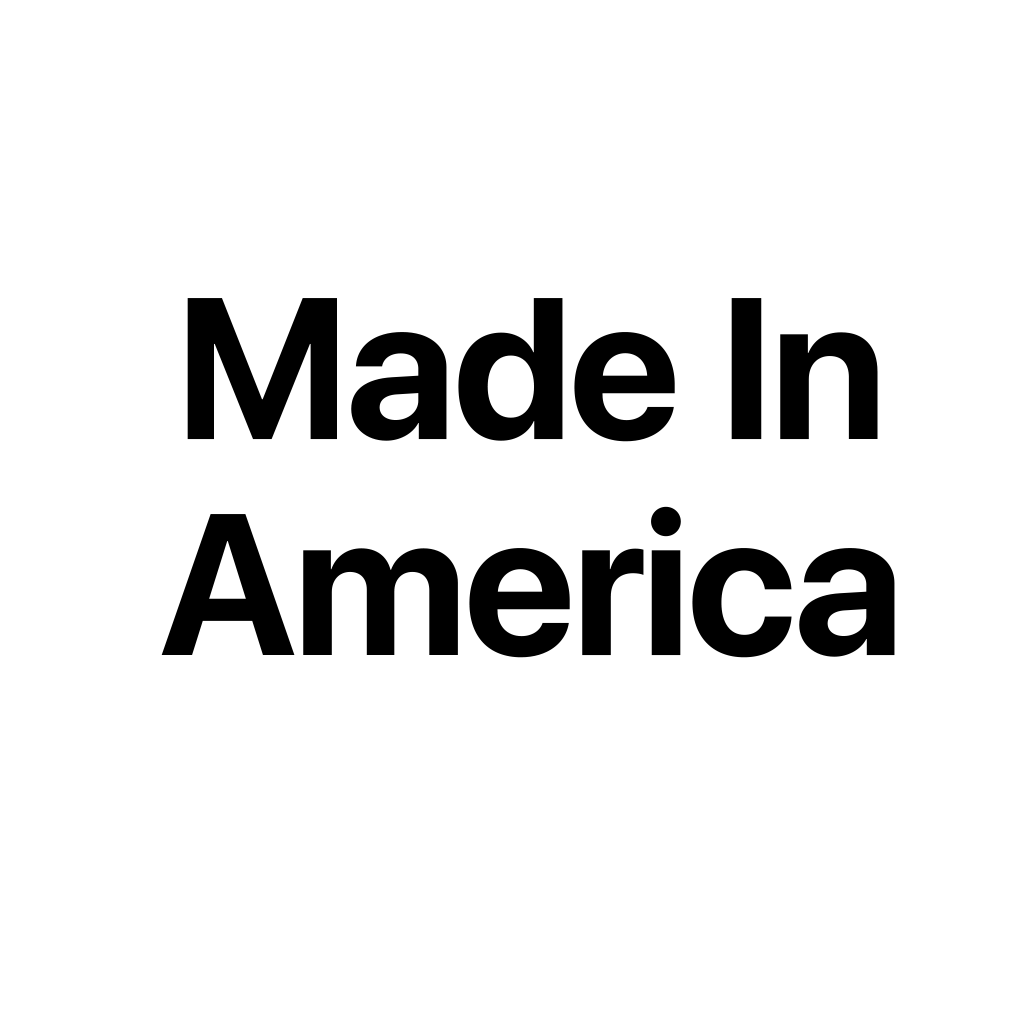
<style>
.page{position:relative;width:1024px;height:1024px;background:#ffffff}
.page>*{position:absolute;margin:0}
.t1{font:200px/216px "SFProDisplay-Bold";color:#000000}
</style>
<div class="page">
<p class="t1" style="left:161px;top:298px;width:734px;height:360px;text-align:center">Made In America</p>
</div>
